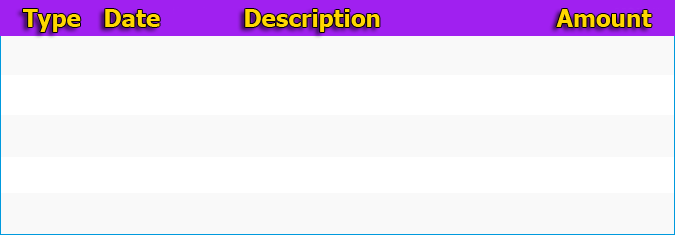
<style>
.page{position:relative;width:675px;height:235px;background:#f9f9f9}
.page>*{position:absolute;margin:0}
.t1{font:24px "Tahoma-Bold";color:#ffd700}
</style>
<div class="page">
<p class="t1" style="left:23px;top:9px;width:58px;height:23px">Type</p>
<p class="t1" style="left:105px;top:9px;width:55px;height:18px">Date</p>
<p class="t1" style="left:245px;top:9px;width:135px;height:23px">Description</p>
<p class="t1" style="left:556px;top:9px;width:96px;height:18px">Amount</p>
</div>
